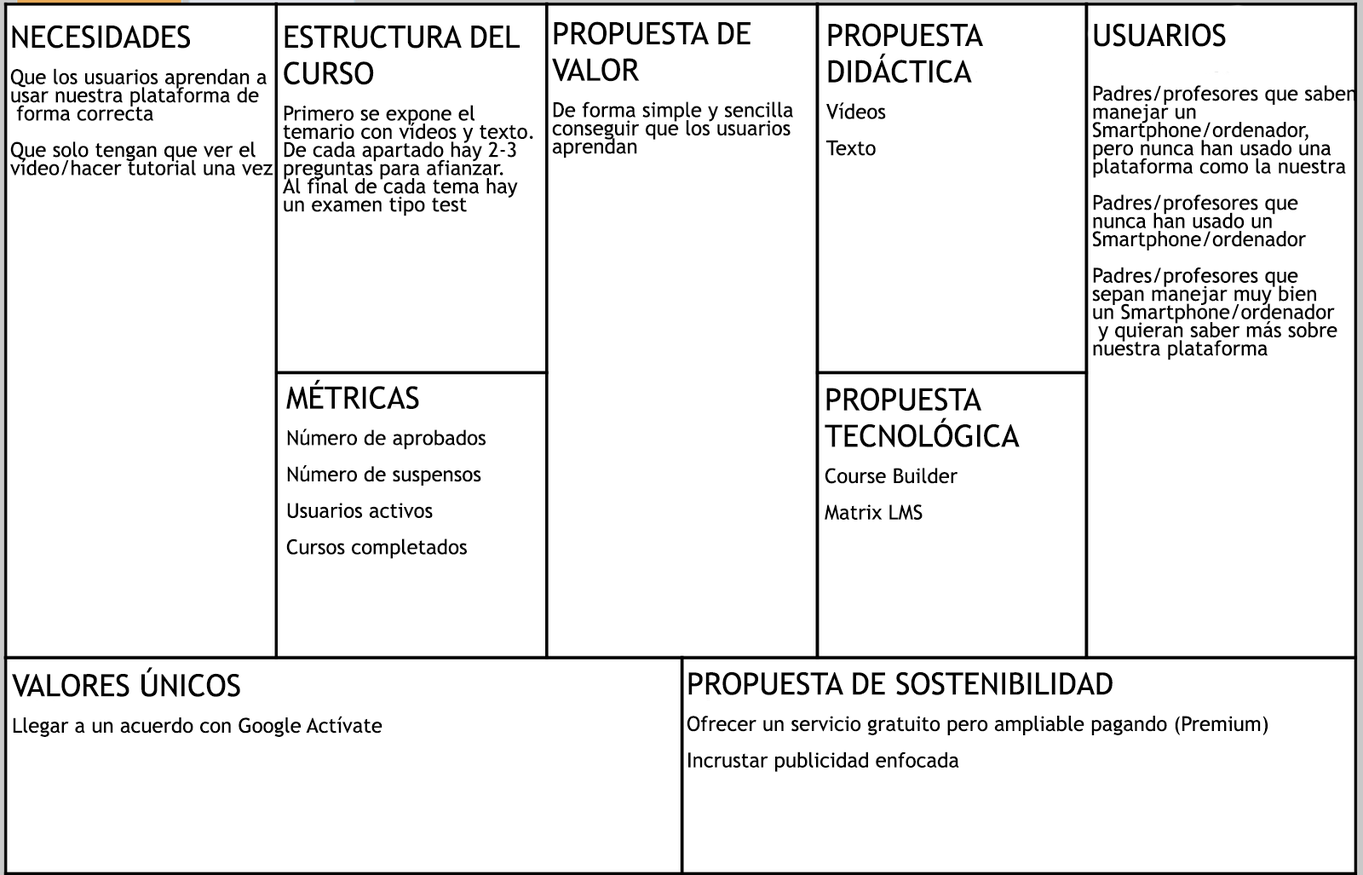
<style>
.page{position:relative;width:1363px;height:875px;background:#ffffff}
.page>*{position:absolute;margin:0}
.t1{font:20.4px/18.2px "TrebuchetMS";color:#000000}
.t2{font:30.7px/18.2px "TrebuchetMS";color:#000000}
</style>
<div class="page">
<p class="t1" style="left:10px;top:25px;width:263px;height:150px"><span class="t2">NECESIDADES<br><br></span>Que los usuarios aprendan a <br>usar nuestra plataforma de<br> forma correcta<br><br>Que solo tengan que ver el <br>vídeo/hacer tutorial una vez</p>
<p class="t1" style="left:283px;top:25px;width:250px;height:191px"><span class="t2">ESTRUCTURA DEL <br><br>CURSO<br><br></span>Primero se expone el <br>temario con vídeos y texto. <br>De cada apartado hay 2-3 <br>preguntas para afianzar. <br>Al final de cada tema hay <br>un examen tipo test</p>
<p class="t1" style="left:552px;top:21px;width:241px;height:137px"><span class="t2">PROPUESTA DE <br><br>VALOR<br><br></span>De forma simple y sencilla <br>conseguir que los usuarios <br>aprendan</p>
<p class="t2" style="left:826px;top:23px;width:157px;height:133px">PROPUESTA <br><br>DIDÁCTICA<br><br><span class="t1">Vídeos <br><br>Texto</span></p>
<p class="t1" style="left:1092px;top:23px;width:264px;height:337px"><span class="t2">USUARIOS<br><br><br></span>Padres/profesores que saben <br>manejar un <br>Smartphone/ordenador, <br>pero nunca han usado una <br>plataforma como la nuestra<br><br>Padres/profesores que <br>nunca han usado un <br>Smartphone/ordenador<br><br>Padres/profesores que <br>sepan manejar muy bien <br>un Smartphone/ordenador<br> y quieran saber más sobre <br>nuestra plataforma</p>
<p class="t1" style="left:286px;top:379px;width:200px;height:180px"><span class="t2">MÉTRICAS<br><br></span>Número de aprobados<br><br>Número de suspensos<br><br>Usuarios activos<br><br>Cursos completados</p>
<p class="t1" style="left:825px;top:388px;width:195px;height:132px"><span class="t2">PROPUESTA <br><br>TECNOLÓGICA<br><br></span>Course Builder<br><br>Matrix LMS</p>
<p class="t1" style="left:12px;top:667px;width:370px;height:70px"><span class="t2">VALORES ÚNICOS<br><br></span>Llegar a un acuerdo con Google Actívate</p>
<p class="t1" style="left:687px;top:671px;width:581px;height:101px"><span class="t2">PROPUESTA DE SOSTENIBILIDAD<br><br></span>Ofrecer un servicio gratuito pero ampliable pagando (Premium)<br><br>Incrustar publicidad enfocada</p>
</div>
